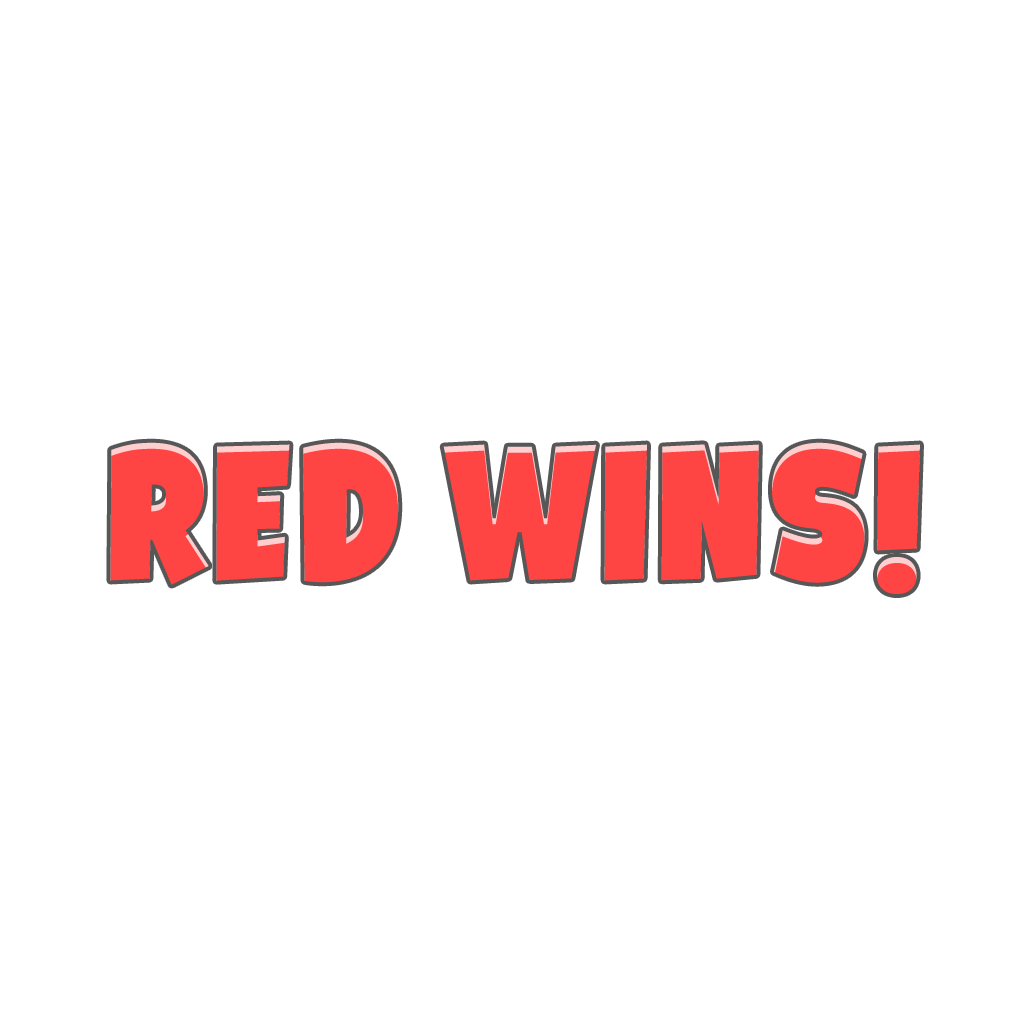
<style>
.page{position:relative;width:1024px;height:1024px;background:#ffffff}
.page>*{position:absolute;margin:0}
.t1{font:200px "Galpon-Black";color:#ff4444}
</style>
<div class="page">
<p class="t1" style="left:110px;top:442px;width:810px;height:152px">Red Wins!</p>
</div>
